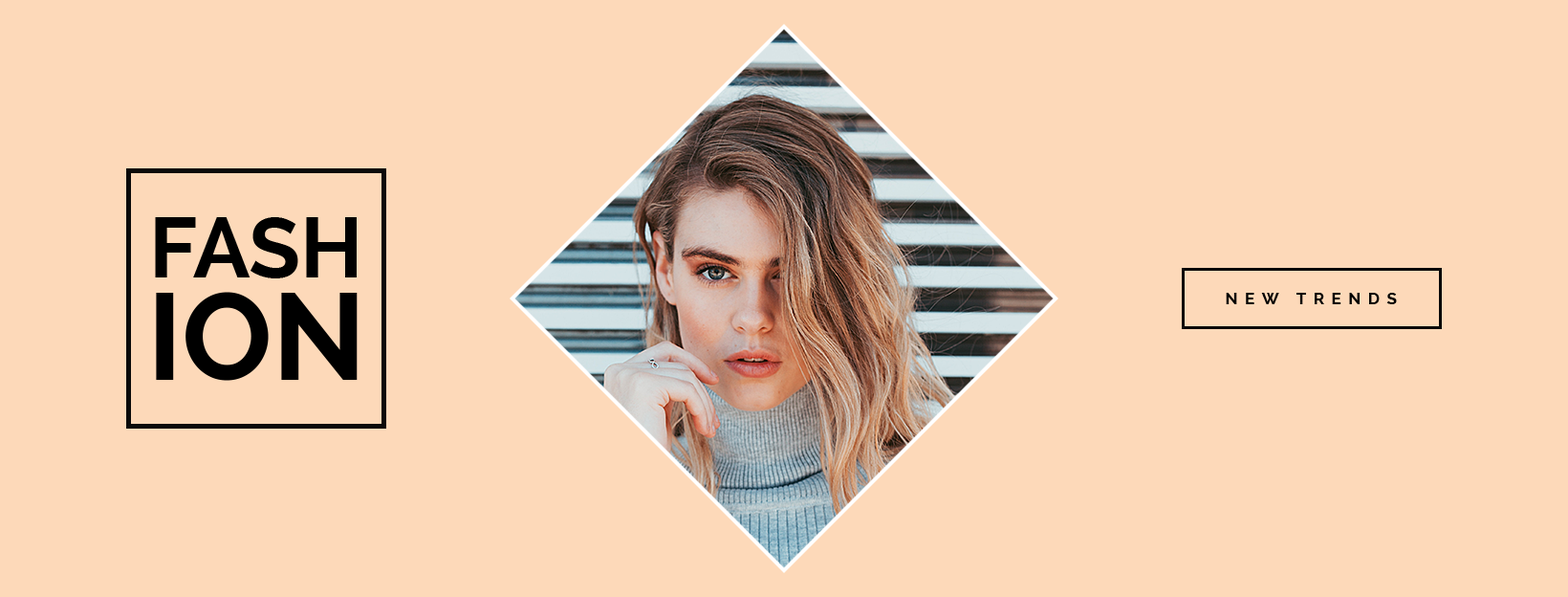
<style>
.page{position:relative;width:1568px;height:597px;background:#fdd9b9}
.page>*{position:absolute;margin:0}
.t1{font:84.1px/102.3px "Raleway-Bold";color:#000000;text-transform:uppercase}
.t2{font:122.4px/102.3px "Raleway-Bold";color:#000000;text-transform:uppercase}
.t3{font:16.3px "Raleway-Bold";letter-spacing:0.44em;color:#000000;text-transform:uppercase}
</style>
<div class="page">
<p class="t1" style="left:155px;top:217px;width:203px;height:164px;text-align:center">fash<br><span class="t2">ion</span></p>
<p class="t3" style="left:1226px;top:293px;width:171px;height:11px">new trends</p>
</div>
